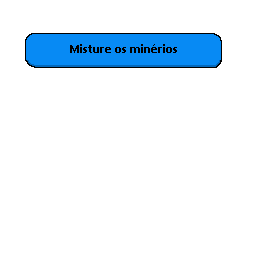
<style>
.page{position:relative;width:256px;height:256px;background:#ffffff}
.page>*{position:absolute;margin:0}
.t1{font:12.5px "Calibri-Bold";color:#000000}
</style>
<div class="page">
<p class="t1" style="left:70px;top:44px;width:107px;height:9px">Misture os minérios</p>
</div>
